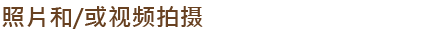
<style>
.page{position:relative;width:432px;height:34px;background:#ffffff}
.page>*{position:absolute;margin:0}
.t1{font:24px "MicrosoftJhengHeiBold";color:#684121}
</style>
<div class="page">
<p class="t1" style="left:2px;top:6px;width:201px;height:23px">照片和/或视频拍摄</p>
</div>
